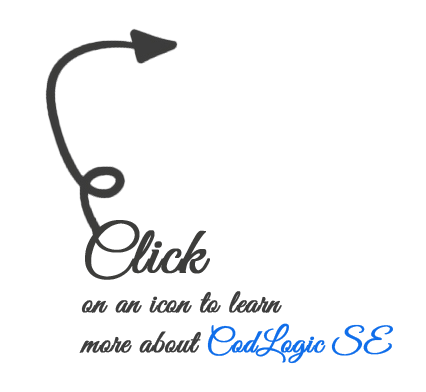
<style>
.page{position:relative;width:426px;height:392px;background:#ffffff}
.page>*{position:absolute;margin:0}
.t1{font:33.3px "GreatVibes-Regular";color:#3d3d3d;font-weight:bold}
.t2{font:66.7px "GreatVibes-Regular";color:#3d3d3b;font-weight:bold}
.t3{font:33.3px "GreatVibes-Regular";color:#000000;font-weight:bold}
.t4{font:33.3px "GreatVibes-Regular";color:#106eea;font-weight:bold}
</style>
<div class="page">
<p class="t1" style="left:79px;top:218px;width:314px;height:146px"><span class="t2">Click</span><span class="t3"> <br></span>on an icon to learn<br>more about <span class="t4">CodLogic SE</span></p>
</div>
